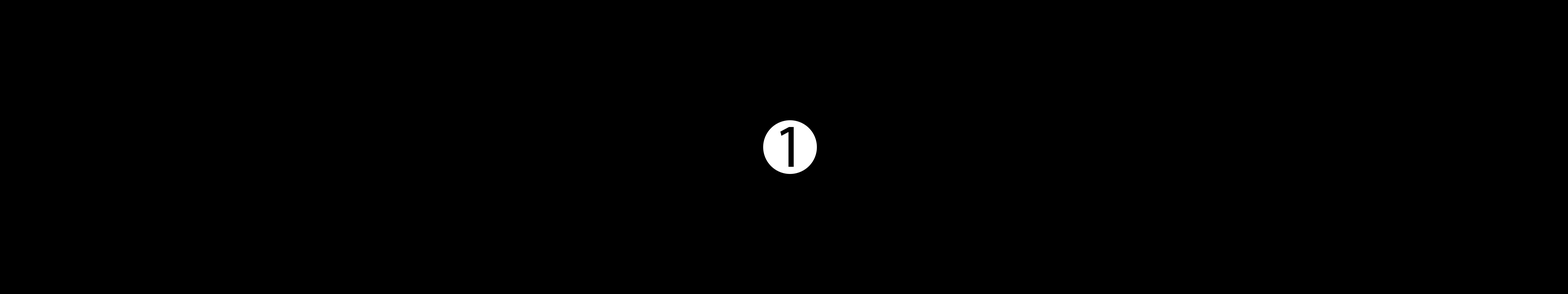
<style>
.page{position:relative;width:1568px;height:294px;background:#000000}
.page>*{position:absolute;margin:0}
.t1{font:61.2px "MyriadPro-Regular";color:#000000}
</style>
<div class="page">
<p class="t1" style="left:780px;top:127px;width:14px;height:40px">1</p>
</div>
